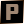
<style>
.page{position:relative;width:24px;height:24px;background:#000000}
.page>*{position:absolute;margin:0}
.t1{font:23px "Sucrose-Bold";letter-spacing:-0.075em;color:#9f8672;scale:1.16 1}
</style>
<div class="page">
<p class="t1" style="left:6px;top:4px;width:13px;height:16px">P</p>
</div>
